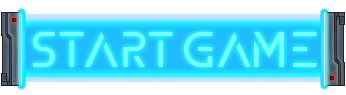
<style>
.page{position:relative;width:346px;height:95px;background:#ffffff}
.page>*{position:absolute;margin:0}
.t1{font:48px "ZELDA";color:#7afefc}
</style>
<div class="page">
<p class="t1" style="left:33px;top:32px;width:284px;height:35px">START Game</p>
</div>
